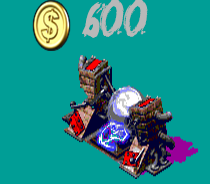
<style>
.page{position:relative;width:210px;height:184px;background:#009e96}
.page>*{position:absolute;margin:0}
.t1{font:47.3px "LeviBrush";color:#b8b8b8;scale:0.76 1}
</style>
<div class="page">
<p class="t1" style="left:82px;top:0px;width:66px;height:38px">600</p>
</div>
